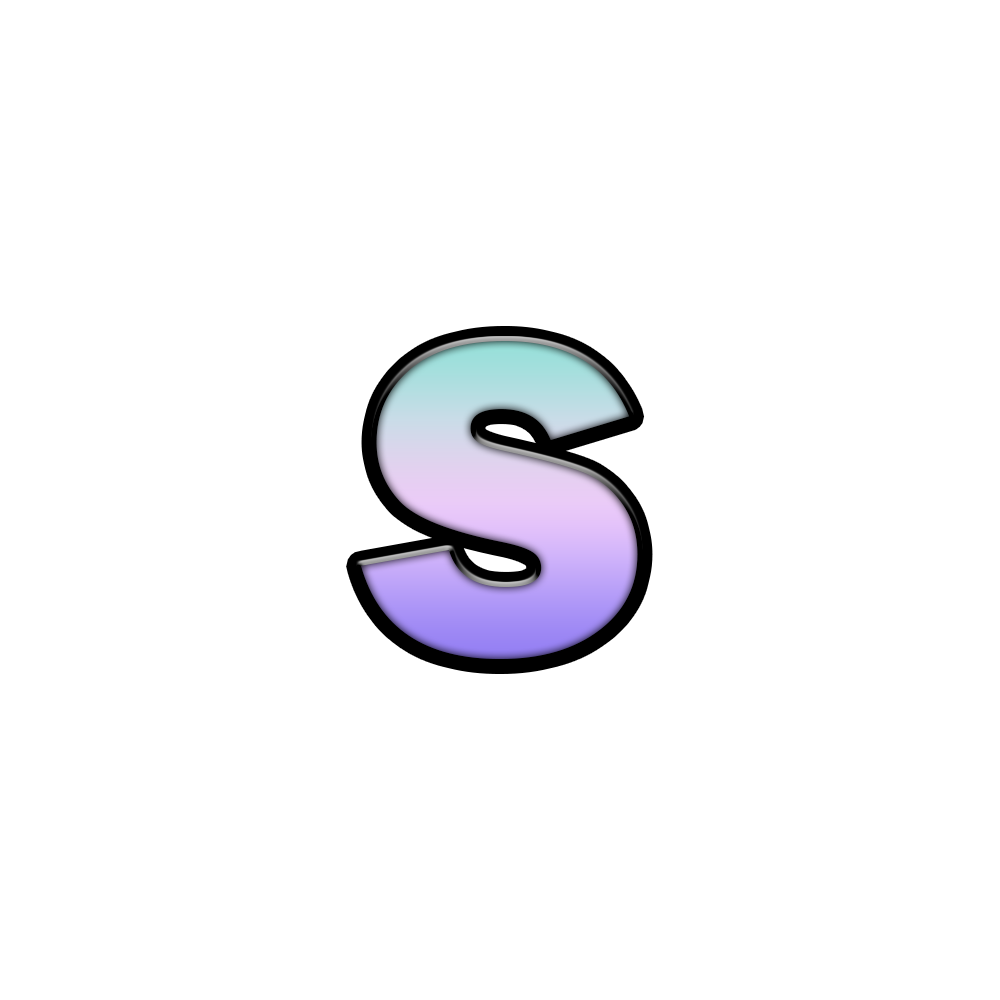
<style>
.page{position:relative;width:1000px;height:1000px;background:#ffffff}
.page>*{position:absolute;margin:0}
.t1{font:462.1px "FranklinGothic-Heavy";letter-spacing:-0.02em}
</style>
<div class="page">
<p class="t1" style="left:361px;top:341px;width:277px;height:318px">S</p>
</div>
